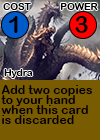
<style>
.page{position:relative;width:100px;height:140px;background:#795b01}
.page>*{position:absolute;margin:0}
.t1{font:9.7px "ArialRoundedMTBold";letter-spacing:0.01em;color:#000000}
.t2{font:24px "ArialRoundedMTBold";letter-spacing:0.01em;color:#000000}
.t3{font:24px "ArialRoundedMTBold";letter-spacing:-0.1em;color:#000000}
.t4{font:12px/10px "ArialRoundedMTBold";letter-spacing:0.01em;color:#000000}
</style>
<div class="page">
<p class="t1" style="left:3px;top:3px;width:28px;height:7px">COST</p>
<p class="t1" style="left:60px;top:3px;width:38px;height:7px">POWER</p>
<p class="t2" style="left:9px;top:16px;width:9px;height:17px">1</p>
<p class="t3" style="left:75px;top:16px;width:13px;height:17px">3</p>
<p class="t1" style="left:4px;top:69px;width:29px;height:9px">Hydra</p>
<p class="t4" style="left:1px;top:85px;width:91px;height:39px">Add two copies<br>to your hand <br>when this card<br>is discarded</p>
</div>
